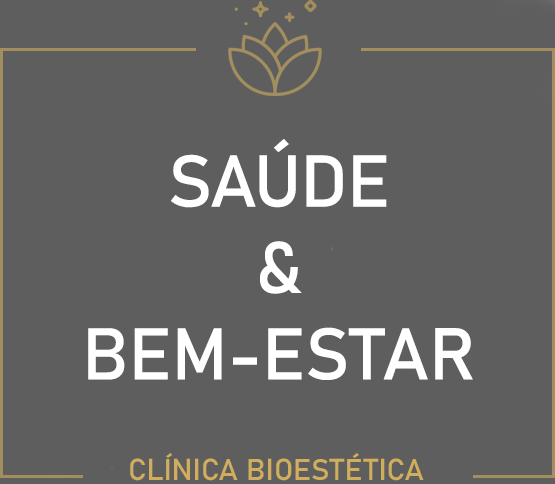
<style>
.page{position:relative;width:555px;height:484px;background:#5e5e5e}
.page>*{position:absolute;margin:0}
.t1{font:72px "Bahnschrift_438wght";color:#ffffff}
.t2{font:30px "Bahnschrift_438wght";color:#d0ae5e}
</style>
<div class="page">
<p class="t1" style="left:88px;top:139px;width:385px;height:241px;text-align:center">SAÚDE<br>&amp;<br>BEM-ESTAR</p>
<p class="t2" style="left:130px;top:453px;width:294px;height:28px">CLÍNICA BIOESTÉTICA</p>
</div>
